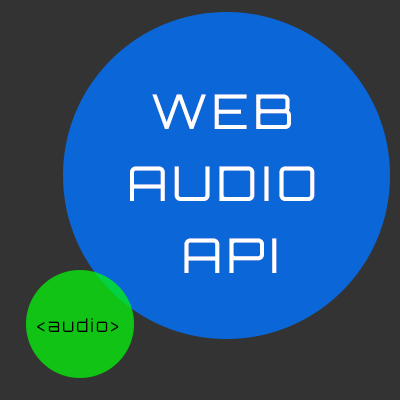
<style>
.page{position:relative;width:400px;height:400px;background:#0b66d7}
.page>*{position:absolute;margin:0}
.t1{font:48px/72px "Orbitron-Light";letter-spacing:0.1em;color:#fffefe}
.t2{font:18px "Orbitron-Light";letter-spacing:0.1em;color:#000000}
</style>
<div class="page">
<p class="t1" style="left:130px;top:94px;width:185px;height:179px;text-align:center">WEB <br>AUDIO <br>API</p>
<p class="t2" style="left:37px;top:318px;width:82px;height:14px">&lt;audio&gt;</p>
</div>
